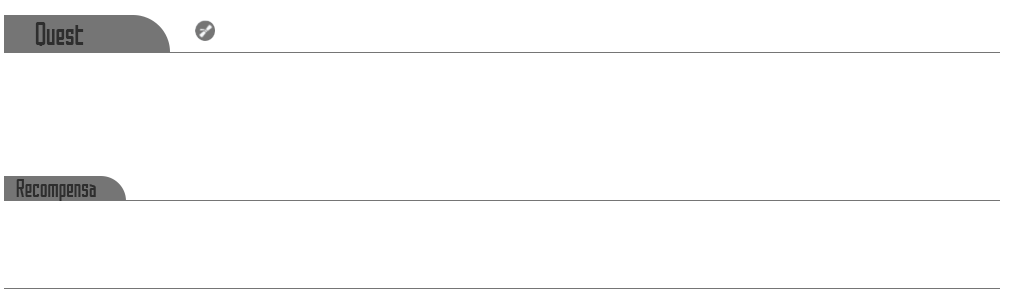
<style>
.page{position:relative;width:1024px;height:300px;background:#ffffff}
.page>*{position:absolute;margin:0}
.t1{font:28px "SAOWelcomeTT-Regular";color:#2e2e2e;scale:0.95 1}
.t2{font:22.4px "SAOWelcomeTT-Regular";color:#2e2e2e;scale:0.95 1}
</style>
<div class="page">
<p class="t1" style="left:35px;top:22px;width:49px;height:24px">Quest</p>
<p class="t2" style="left:16px;top:179px;width:80px;height:22px">Recompensa</p>
</div>
